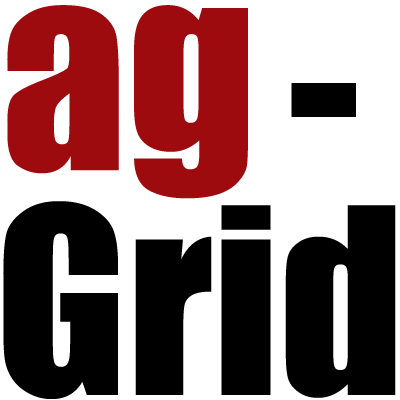
<style>
.page{position:relative;width:400px;height:400px;background:#ffffff}
.page>*{position:absolute;margin:0}
.t1{font:250px "Impact";color:#9e0b0f}
.t2{font:250px "Impact";color:#000000}
.t3{font:240px "Impact";color:#000000}
</style>
<div class="page">
<p class="t1" style="left:7px;top:5px;width:241px;height:194px">ag</p>
<p class="t2" style="left:291px;top:83px;width:65px;height:34px">-</p>
<p class="t3" style="left:3px;top:201px;width:393px;height:198px">Grid</p>
</div>
